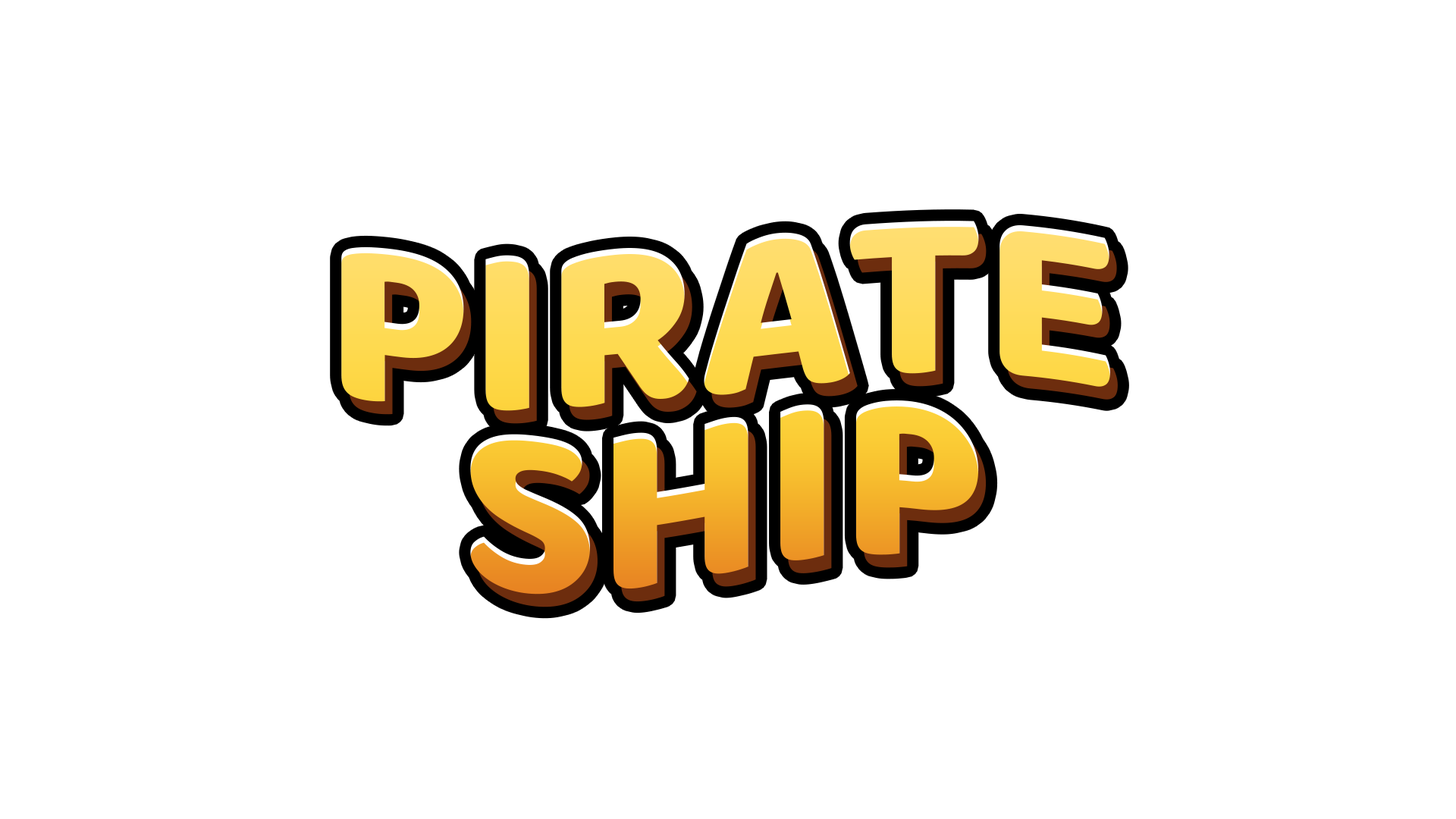
<style>
.page{position:relative;width:1456px;height:819px;background:#ffffff}
.page>*{position:absolute;margin:0}
.t1{font:248.3px "Baloo-Regular";color:#ffdc5c}
.t2{font:248.3px "Baloo-Regular"}
</style>
<div class="page">
<p class="t1" style="left:341px;top:221px;width:769px;height:190px">PIRATE</p>
<p class="t2" style="left:470px;top:400px;width:509px;height:195px">SHIP</p>
</div>
